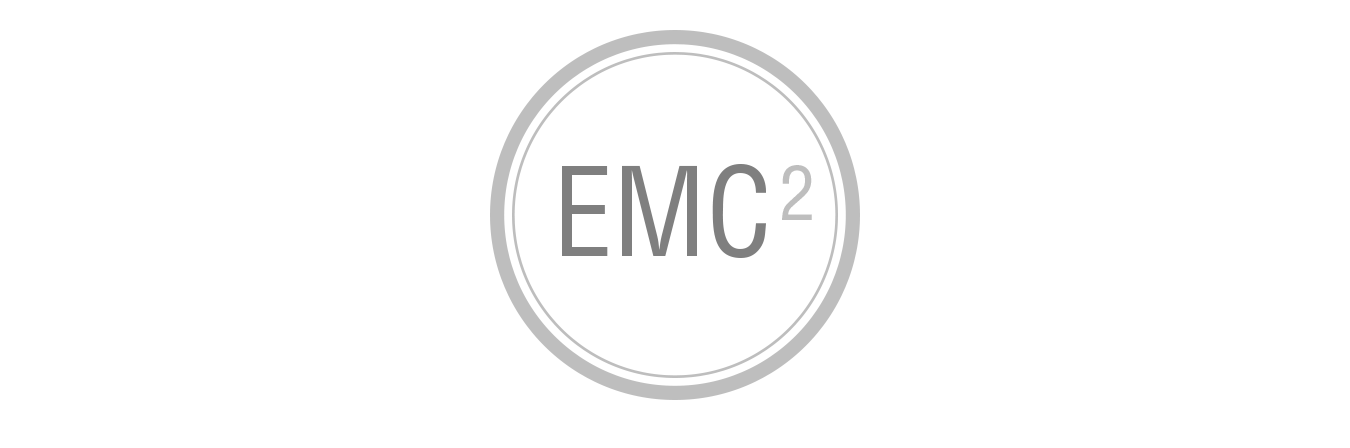
<style>
.page{position:relative;width:1350px;height:448px;background:#ffffff}
.page>*{position:absolute;margin:0}
.t1{font:120px "Helvetica-Condensed";color:#7f7f7f}
.t2{font:73.8px "Helvetica-Condensed";color:#bebebe}
</style>
<div class="page">
<p class="t1" style="left:562px;top:164px;width:204px;height:94px">EMC</p>
<p class="t2" style="left:782px;top:165px;width:30px;height:55px">2</p>
</div>
